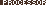
<style>
.page{position:relative;width:46px;height:5px;background:#472f22}
.page>*{position:absolute;margin:0}
.t1{font:7px "Small Fonts";color:#fafbfc}
</style>
<div class="page">
<p class="t1" style="left:3px;top:0px;width:43px;height:5px">PROCESSOR</p>
</div>
